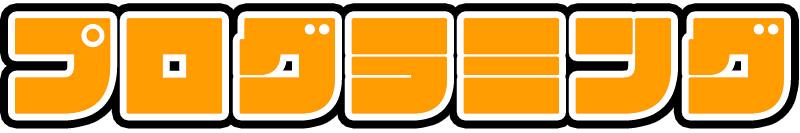
<style>
.page{position:relative;width:800px;height:133px;background:#ff9c00}
.page>*{position:absolute;margin:0}
.t1{font:109.3px "id-kana021";color:#ff9c00;font-weight:bold}
</style>
<div class="page">
<p class="t1" style="left:15px;top:18px;width:769px;height:96px">プログラミング</p>
<p class="t1" style="left:15px;top:18px;width:769px;height:96px">プログラミング</p>
<p class="t1" style="left:15px;top:18px;width:769px;height:96px">プログラミング</p>
</div>
